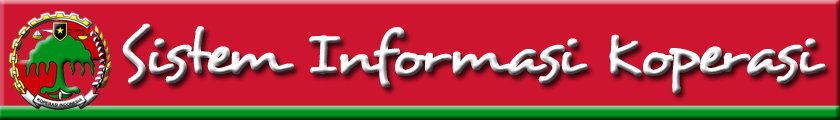
<style>
.page{position:relative;width:840px;height:120px;background:#cd152f}
.page>*{position:absolute;margin:0}
.t1{font:61.6px "Desyrel";font-weight:bold}
</style>
<div class="page">
<p class="t1" style="left:122px;top:23px;width:704px;height:71px">Sistem Informasi Koperasi</p>
</div>
